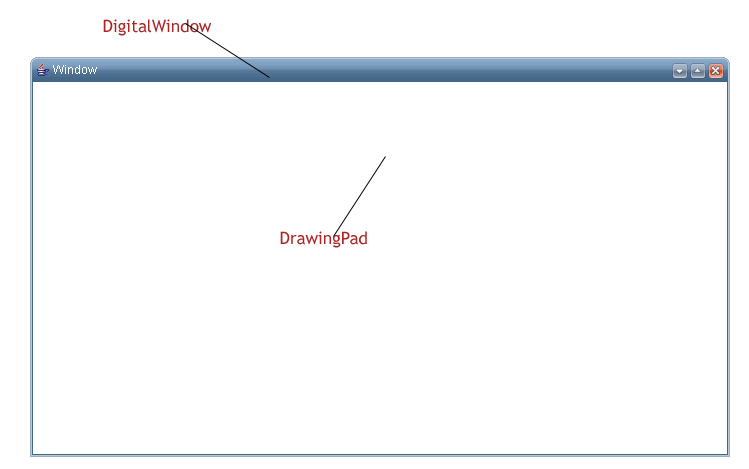
<style>
.page{position:relative;width:749px;height:469px;background:#ffffff}
.page>*{position:absolute;margin:0}
.t1{font:17px "TrebuchetMS";color:#ad2424}
</style>
<div class="page">
<p class="t1" style="left:103px;top:19px;width:109px;height:17px">DigitalWindow</p>
<p class="t1" style="left:280px;top:231px;width:87px;height:17px">DrawingPad</p>
</div>
